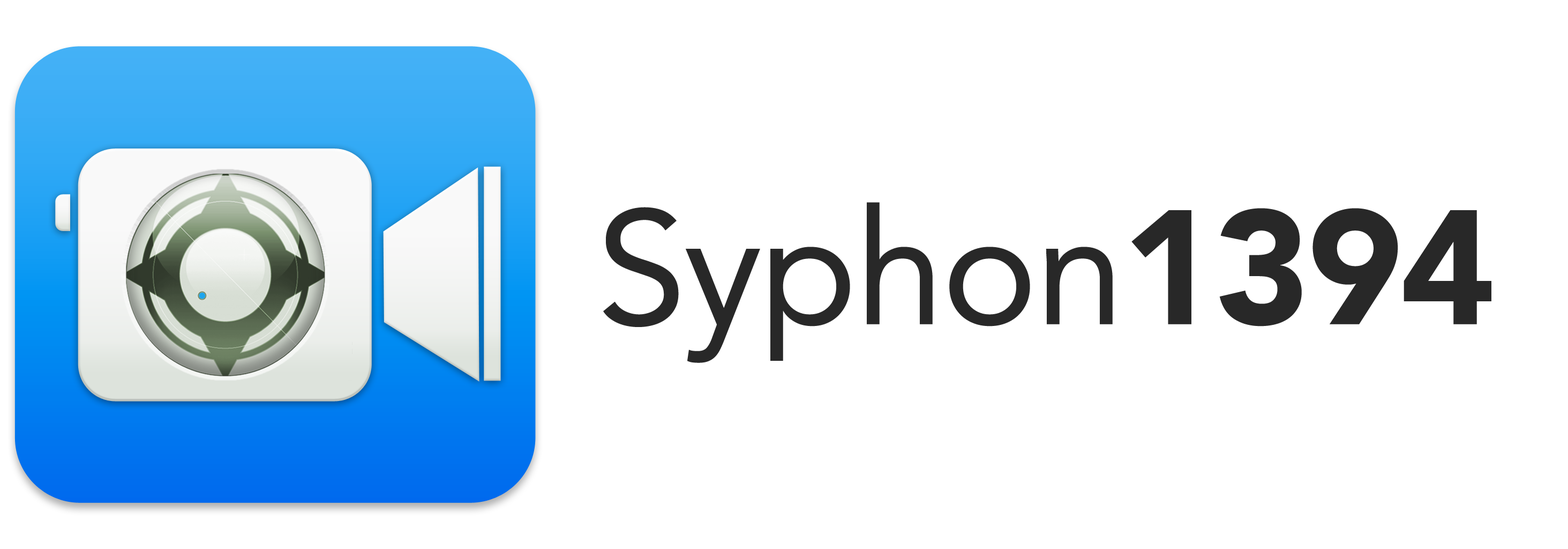
<style>
.page{position:relative;width:1568px;height:549px;background:#ffffff}
.page>*{position:absolute;margin:0}
.t1{font:160.7px "Avenir-Roman";letter-spacing:-0.015em;color:#282828}
.t2{font:160.7px "Avenir-Black";letter-spacing:-0.015em;color:#282828}
</style>
<div class="page">
<p class="t1" style="left:603px;top:202px;width:888px;height:161px">Syphon<span class="t2">1394</span></p>
</div>
